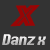
<style>
.page{position:relative;width:50px;height:50px;background:#333333}
.page>*{position:absolute;margin:0}
.t1{font:30.4px "Phosphate-Inline";color:#980505;font-style:italic;scale:1.31 1}
.t2{font:13.9px "Krungthep";letter-spacing:-0.075em;font-style:italic}
</style>
<div class="page">
<p class="t1" style="left:10px;top:5px;width:30px;height:22px;rotate:-1deg">X</p>
<p class="t2" style="left:2px;top:34px;width:44px;height:11px">Danz x</p>
</div>
